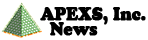
<style>
.page{position:relative;width:148px;height:40px;background:#ffffff}
.page>*{position:absolute;margin:0}
.t1{font:19px/15.4px "CooperBlack";color:#000000;font-weight:bold;scale:0.87 1}
</style>
<div class="page">
<p class="t1" style="left:40px;top:7px;width:106px;height:29px">APEXS, Inc.<br>  News</p>
</div>
